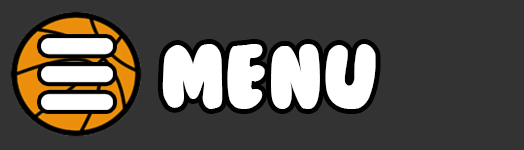
<style>
.page{position:relative;width:524px;height:150px;background:#333333}
.page>*{position:absolute;margin:0}
.t1{font:84px "BubbleGum";color:#ffffff}
</style>
<div class="page">
<p class="t1" style="left:162px;top:44px;width:214px;height:65px">menu</p>
</div>
